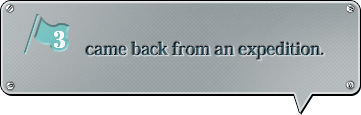
<style>
.page{position:relative;width:361px;height:115px}
.page>*{position:absolute;margin:0}
.t1{font:18px "HeiseiMinStd-W7";letter-spacing:-0.04em;font-weight:bold}
</style>
<div class="page">
<p class="t1" style="left:86px;top:41px;width:238px;height:19px">came back from an expedition.</p>
</div>
